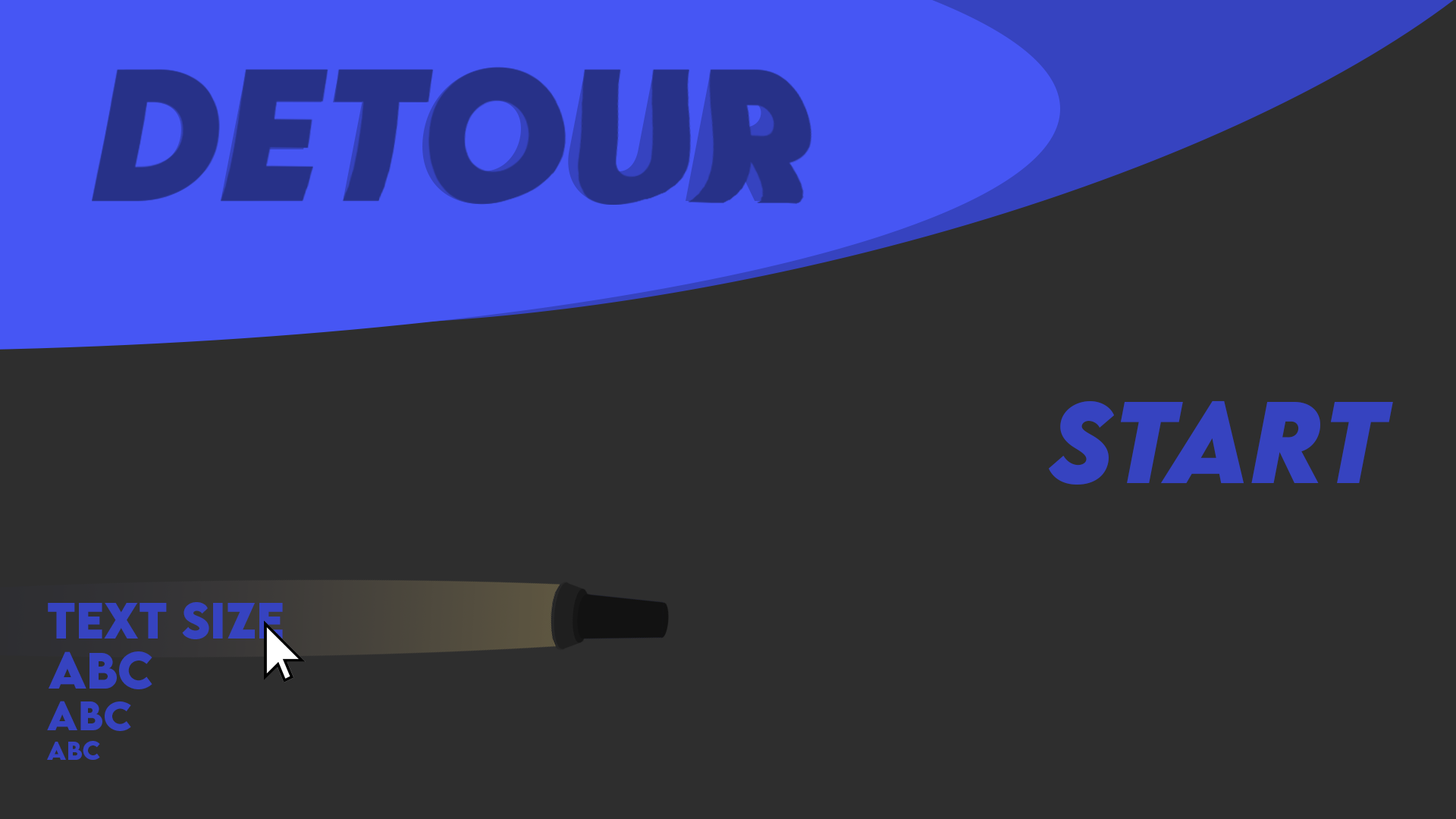
<style>
.page{position:relative;width:1456px;height:819px;background:#2e2e2e}
.page>*{position:absolute;margin:0}
.t1{font:167px "LEMONMILK-BoldItalic";color:#273188}
.t2{font:102.8px "LEMONMILK-BoldItalic";color:#3643c0}
.t3{font:45.7px "LEMONMILK-Bold";color:#3643c0}
.t4{font:36.2px "LEMONMILK-Bold";color:#3643c0}
.t5{font:22.8px "LEMONMILK-Bold";color:#3643c0}
</style>
<div class="page">
<p class="t1" style="left:92px;top:67px;width:704px;height:138px">detour</p>
<p class="t2" style="left:1049px;top:400px;width:344px;height:85px">start</p>
<p class="t3" style="left:48px;top:602px;width:235px;height:37px">text size</p>
<p class="t3" style="left:49px;top:651px;width:103px;height:38px">abc</p>
<p class="t4" style="left:47px;top:701px;width:84px;height:30px">abc</p>
<p class="t5" style="left:47px;top:741px;width:53px;height:19px">abc</p>
</div>
